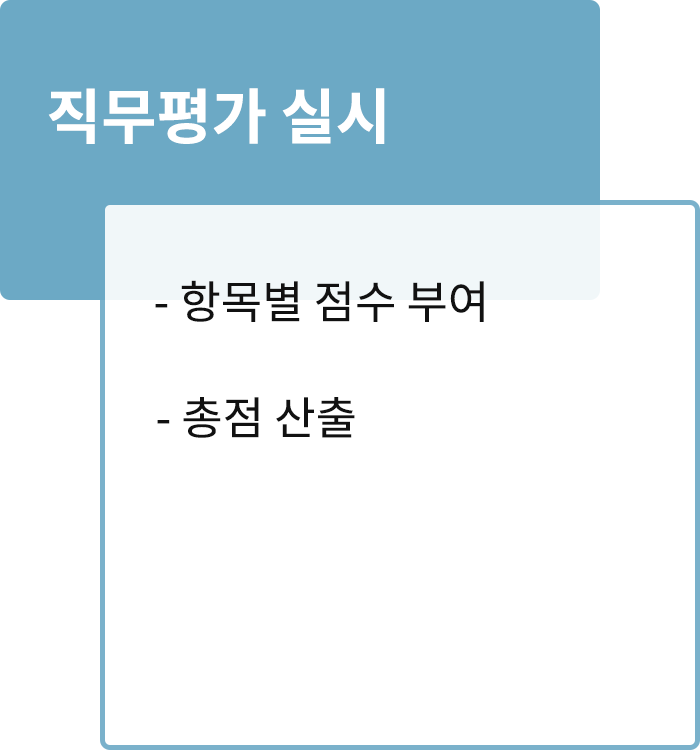
<style>
.page{position:relative;width:700px;height:750px;background:#ffffff}
.page>*{position:absolute;margin:0}
.t1{font:60px "NotoSansCJKkr-Bold";color:#ffffff}
.t2{font:45px "NotoSansCJKkr-Regular";color:#111111}
</style>
<div class="page">
<p class="t1" style="left:48px;top:88px;width:337px;height:56px">직무평가 실시</p>
<p class="t2" style="left:155px;top:280px;width:329px;height:42px">- 항목별 점수 부여</p>
<p class="t2" style="left:157px;top:397px;width:198px;height:41px">- 총점 산출</p>
</div>
